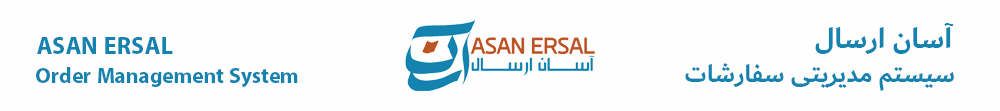
<style>
.page{position:relative;width:1000px;height:111px;background:#fefefe}
.page>*{position:absolute;margin:0}
.t1{font:30px "Dubai-Bold";color:#1483b0}
.t2{font:34px "MyriadArabic-Bold";color:#1483b0}
.t3{font:26px "Dubai-Bold";color:#1483b0}
.t4{font:30px "MyriadArabic-Bold";color:#1483b0}
</style>
<div class="page">
<p class="t1" style="left:815px;top:23px;width:139px;height:31px">آسان ارسال</p>
<p class="t2" style="left:37px;top:37px;width:136px;height:17px">ASAN ERSAL</p>
<p class="t3" style="left:685px;top:63px;width:269px;height:28px">سیستم مدیریتی سفارشات</p>
<p class="t4" style="left:36px;top:67px;width:262px;height:21px">Order Management System</p>
</div>
